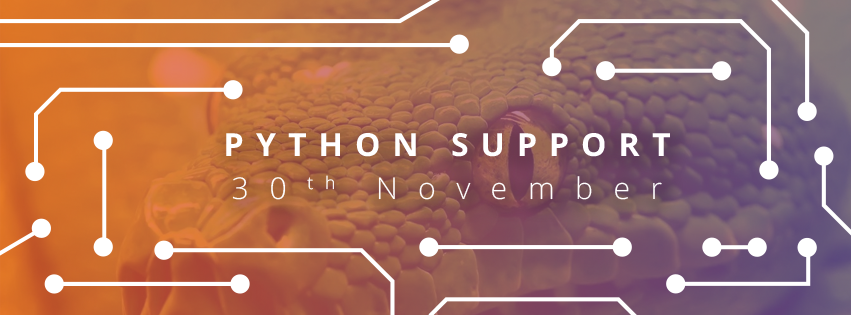
<style>
.page{position:relative;width:851px;height:315px}
.page>*{position:absolute;margin:0}
.t1{font:31.8px "OpenSans-Bold";letter-spacing:0.38em;color:#ffffff}
.t2{font:30.1px "OpenSans-Light";letter-spacing:0.68em;color:#ffffff}
</style>
<div class="page">
<p class="t1" style="left:226px;top:133px;width:444px;height:24px">PYTHON SUPPORT</p>
<p class="t2" style="left:232px;top:175px;width:430px;height:25px">30th November</p>
</div>
